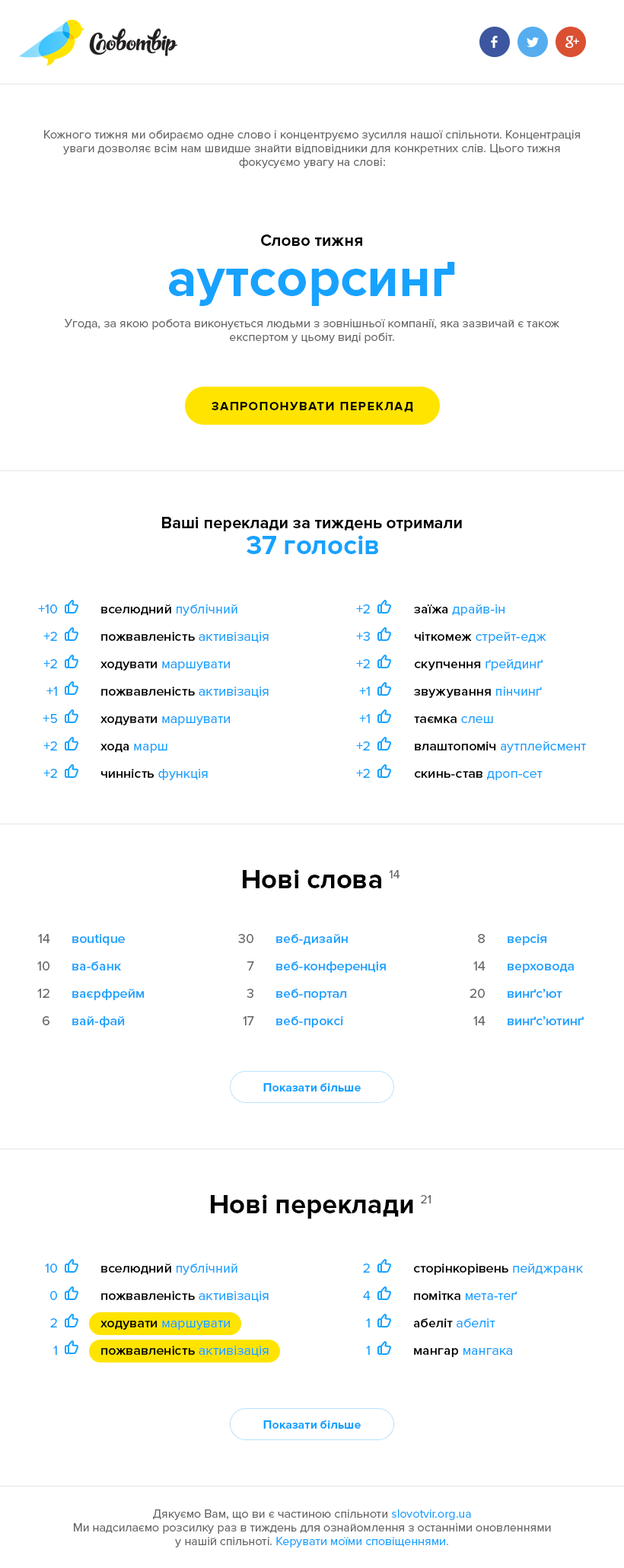
<style>
.page{position:relative;width:624px;height:1568px;background:#ffffff}
.page>*{position:absolute;margin:0}
.t1{font:12.2px/13.7px "ProximaNova-Regular";color:#666666}
.t2{font:16.7px "ProximaNova-Bold";color:#000000}
.t3{font:54.8px "ProximaNova-Bold";color:#17a2ff}
.t4{font:12.2px "ProximaNova-Bold";letter-spacing:0.1em;color:#000000;text-transform:uppercase}
.t5{font:27.4px "ProximaNova-Bold";color:#17a2ff}
.t6{font:13.7px/27.4px "ProximaNova-Regular";color:#17a2ff}
.t7{font:13.7px/27.4px "ProximaNova-Semibold";color:#000000}
.t8{font:27.4px "ProximaNova-Bold";color:#000000}
.t9{font:12.2px "ProximaNova-Regular";color:#666666}
.t10{font:13.7px/27.4px "ProximaNova-Regular";color:#666666}
.t11{font:13.7px/27.4px "ProximaNova-Semibold";color:#17a2ff}
.t12{font:12.2px "ProximaNova-Bold";color:#17a2ff}
.t13{font:12.2px/13.7px "ProximaNova-Regular";color:#17a2ff}
</style>
<div class="page">
<p class="t1" style="left:44px;top:130px;width:536px;height:38px;text-align:center">Кожного тижня ми обираємо одне слово і концентруємо зусилля нашої спільноти. Концентрація уваги дозволяє всім нам швидше знайти відповідники для конкретних слів. Цього тижня фокусуємо увагу на слові:</p>
<p class="t2" style="left:261px;top:234px;width:101px;height:12px">Слово тижня</p>
<p class="t3" style="left:169px;top:262px;width:286px;height:44px">аутсорсинґ</p>
<p class="t1" style="left:65px;top:319px;width:494px;height:24px;text-align:center">Угода, за якою робота виконується людьми з зовнішньої компанії, яка зазвичай є також експертом у цьому виді робіт.</p>
<p class="t4" style="left:212px;top:402px;width:201px;height:10px">Запропонувати переклад</p>
<p class="t2" style="left:162px;top:517px;width:300px;height:14px">Ваші переклади за тиждень отримали</p>
<p class="t5" style="left:247px;top:535px;width:131px;height:19px">37 голосів</p>
<p class="t6" style="left:38px;top:604px;width:19px;height:174px;text-align:right">+10<br>+2<br>+2<br>+1<br>+5<br>+2<br>+2</p>
<p class="t7" style="left:100px;top:604px;width:169px;height:176px">вселюдний <span class="t6">публічний<br></span>пожвавленість <span class="t6">активізація<br></span>ходувати <span class="t6">маршувати<br></span>пожвавленість <span class="t6">активізація<br></span>ходувати <span class="t6">маршувати<br></span>хода <span class="t6">марш<br></span>чинність <span class="t6">функція</span></p>
<p class="t6" style="left:356px;top:604px;width:14px;height:174px;text-align:right">+2<br>+3<br>+2<br>+1<br>+1<br>+2<br>+2</p>
<p class="t6" style="left:414px;top:604px;width:173px;height:176px"><span class="t7">заїжа </span>драйв-ін<br><span class="t7">чіткомеж </span>стрейт-едж<br><span class="t7">скупчення </span>ґрейдинґ<br><span class="t7">звужування </span>пінчинґ<br><span class="t7">таємка </span>слеш<br><span class="t7">влаштопоміч </span>аутплейсмент<br><span class="t7">скинь-став </span>дроп-сет</p>
<p class="t8" style="left:243px;top:869px;width:138px;height:19px">Нові слова</p>
<p class="t9" style="left:389px;top:870px;width:11px;height:8px">14</p>
<p class="t10" style="left:37px;top:934px;width:13px;height:91px;text-align:right">14<br>10<br>12<br>6</p>
<p class="t11" style="left:72px;top:934px;width:73px;height:94px">вoutique<br>ва-банк<br>ваєрфрейм<br>вай-фай</p>
<p class="t10" style="left:238px;top:934px;width:16px;height:91px;text-align:right">30<br>7<br>3<br>17</p>
<p class="t11" style="left:276px;top:934px;width:110px;height:94px">веб-дизайн<br>веб-конференція<br>веб-портал<br>веб-проксі</p>
<p class="t10" style="left:470px;top:934px;width:16px;height:91px;text-align:right">8<br>14<br>20<br>14</p>
<p class="t11" style="left:508px;top:934px;width:76px;height:91px">версія<br>верховода<br>винґс’ют<br>винґс’ютинґ</p>
<p class="t12" style="left:263px;top:1083px;width:98px;height:9px">Показати більше</p>
<p class="t8" style="left:211px;top:1194px;width:202px;height:25px">Нові переклади</p>
<p class="t9" style="left:421px;top:1195px;width:10px;height:8px">21</p>
<p class="t6" style="left:45px;top:1264px;width:12px;height:91px;text-align:right">10<br>0<br>2<br>1</p>
<p class="t7" style="left:100px;top:1263px;width:169px;height:94px">вселюдний <span class="t6">публічний<br></span>пожвавленість <span class="t6">активізація<br></span>ходувати <span class="t6">маршувати<br></span>пожвавленість <span class="t6">активізація</span></p>
<p class="t6" style="left:363px;top:1264px;width:8px;height:91px;text-align:right">2<br>4<br>1<br>1</p>
<p class="t7" style="left:413px;top:1263px;width:170px;height:94px">сторінкорівень <span class="t6">пейджранк<br></span>помітка <span class="t6">мета-теґ<br></span>абеліт <span class="t6">абеліт<br></span>мангар <span class="t6">мангака</span></p>
<p class="t12" style="left:263px;top:1420px;width:98px;height:9px">Показати більше</p>
<p class="t1" style="left:74px;top:1509px;width:477px;height:38px;text-align:center">Дякуємо Вам, що ви є частиною спільноти <span class="t13">slovotvir.org.ua</span><br>Ми надсилаємо розсилку раз в тиждень для ознайомлення з останніми оновленнями<br>у нашій спільноті. <span class="t13">Керувати моїми сповіщеннями.</span></p>
</div>
